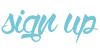
<style>
.page{position:relative;width:100px;height:50px;background:#ffffff}
.page>*{position:absolute;margin:0}
.t1{font:67px "WolfintheCity";color:#76c6d7}
</style>
<div class="page">
<p class="t1" style="left:1px;top:10px;width:98px;height:33px">sign up</p>
</div>
